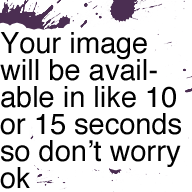
<style>
.page{position:relative;width:192px;height:192px;background:#ffffff}
.page>*{position:absolute;margin:0}
.t1{font:29px/27px "Helvetica";color:#000000}
</style>
<div class="page">
<p class="t1" style="left:0px;top:32px;width:181px;height:157px">Your image<br>will be avail-<br>able in like 10<br>or 15 seconds<br>so don’t worry<br>ok</p>
</div>
